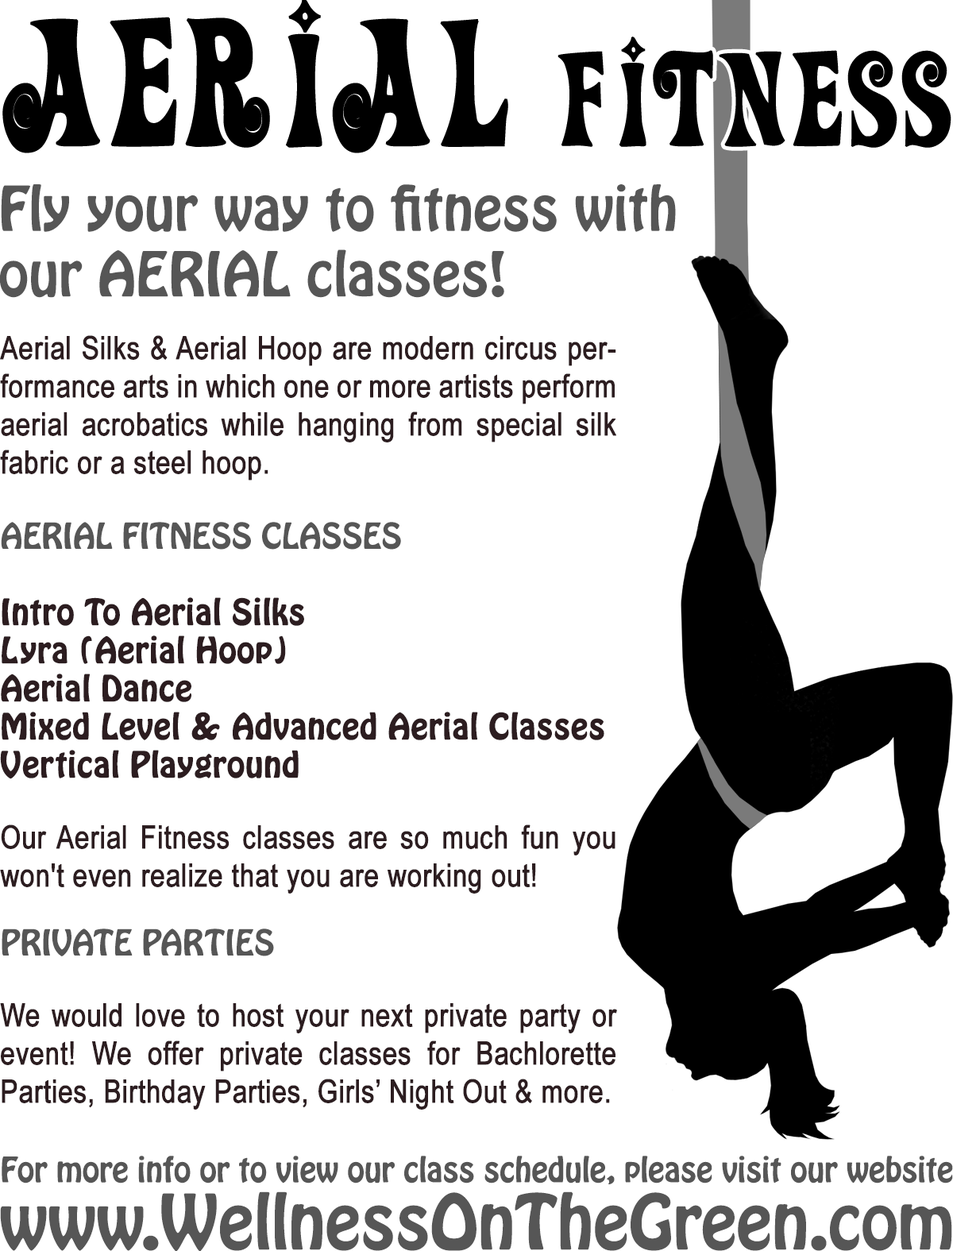
<style>
.page{position:relative;width:953px;height:1251px;background:#ffffff}
.page>*{position:absolute;margin:0}
.t1{font:134px "ActionIs";color:#000000;font-weight:bold}
.t2{font:181.2px "ActionIs";color:#000000;font-weight:bold}
.t3{font:54.6px "HoboStd";color:#565656}
.t4{font:31.8px "ArialNarrow";color:#2c1d20;font-weight:bold}
.t5{font:31.8px "HoboStd";color:#565656}
.t6{font:31.8px "HoboStd";color:#2c1d20;font-weight:bold}
.t7{font:30.9px "HoboStd";color:#565656}
.t8{font:67.2px "HoboStd";color:#565656}
</style>
<div class="page">
<p class="t1" style="left:2px;top:0px;width:950px;height:153px"><span class="t2">Aerial</span> FITNESS</p>
<p class="t3" style="left:0px;top:184px;width:676px;height:114px">Fly your way to fitness with<br>our AERIAL classes!</p>
<p class="t4" style="left:0px;top:335px;width:617px;height:775px;text-align:justify">Aerial Silks &amp; Aerial Hoop are modern circus performance arts in which one or more artists perform aerial acrobatics while hanging from special silk fabric or a steel hoop.<br><span class="t5"><br>AERIAL FITNESS CLASSES<br><br></span><span class="t6">Intro To Aerial Silks<br>Lyra (Aerial Hoop)<br>Aerial Dance<br>Mixed Level &amp; Advanced Aerial Classes<br>Vertical Playground<br><br></span>Our Aerial Fitness classes are so much fun you won't even realize that you are working out!<br><br><span class="t5">PRIVATE PARTIES<br><br></span>We would love to host your next private party or event! We offer private classes for Bachlorette Parties, Birthday Parties, Girls’ Night Out &amp; more.</p>
<p class="t7" style="left:0px;top:1156px;width:953px;height:96px;text-align:center">For more info or to view our class schedule, please visit our website<br><span class="t8">www.WellnessOnTheGreen.com</span></p>
</div>
